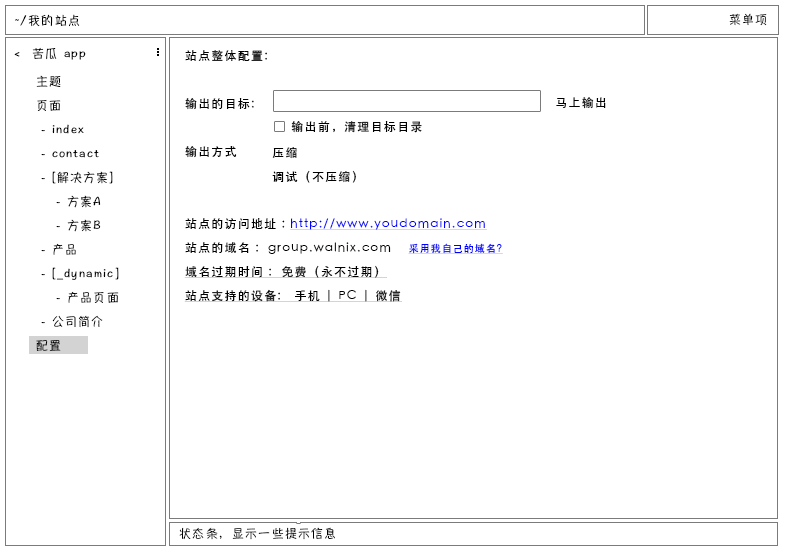
<style>
.page{position:relative;width:788px;height:555px;background:#ffffff}
.page>*{position:absolute;margin:0}
.t1{font:12px "HannotateSC-W5";letter-spacing:0.1em;color:#000000}
.t2{font:12px/24px "STHeiti";letter-spacing:0.1em;color:#000000;text-decoration:underline}
.t3{font:12px/24px "STHeiti";letter-spacing:0.1em;color:#000000}
.t4{font:12px/24px "STHeiti";letter-spacing:0.1em;color:#0000ff;text-decoration:underline}
.t5{font:10px/24px "STHeiti";letter-spacing:0.1em;color:#0000ff;text-decoration:underline}
.t6{font:12px/24px "HannotateSC-W5";letter-spacing:0.1em;color:#000000}
.t7{font:12px "STHeiti";letter-spacing:0.1em;color:#000000}
</style>
<div class="page">
<p class="t1" style="left:15px;top:14px;width:65px;height:13px">~/我的站点</p>
<p class="t1" style="left:729px;top:13px;width:38px;height:13px">菜单项</p>
<p class="t1" style="left:14px;top:47px;width:72px;height:13px">&lt;  苦瓜 app</p>
<p class="t2" style="left:184px;top:50px;width:319px;height:252px"><span class="t3">站点整体配置:<br><br>输出的目标:<br><br>输出方式<br><br><br>站点的访问地址 : </span><span class="t4">http://www.youdomain.com<br></span><span class="t3">站点的域名 :  group.walnix.com    </span><span class="t5">采用我自己的域名?<br></span>域名过期时间 :  免费（永不过期）<br>站点支持的设备:   手机 | PC | 微信</p>
<p class="t6" style="left:36px;top:75px;width:83px;height:276px">主题<br>页面<br> - index<br> - contact<br> - [解决方案]<br>    - 方案A<br>    - 方案B<br> - 产品<br> - [_dynamic]<br>    - 产品页面<br> - 公司简介<br>配置</p>
<p class="t7" style="left:556px;top:97px;width:50px;height:12px">马上输出</p>
<p class="t7" style="left:291px;top:121px;width:131px;height:12px">输出前，清理目标目录</p>
<p class="t3" style="left:272px;top:147px;width:84px;height:36px">压缩<br>调试（不压缩）</p>
<p class="t1" style="left:179px;top:527px;width:156px;height:13px">状态条，显示一些提示信息</p>
</div>
